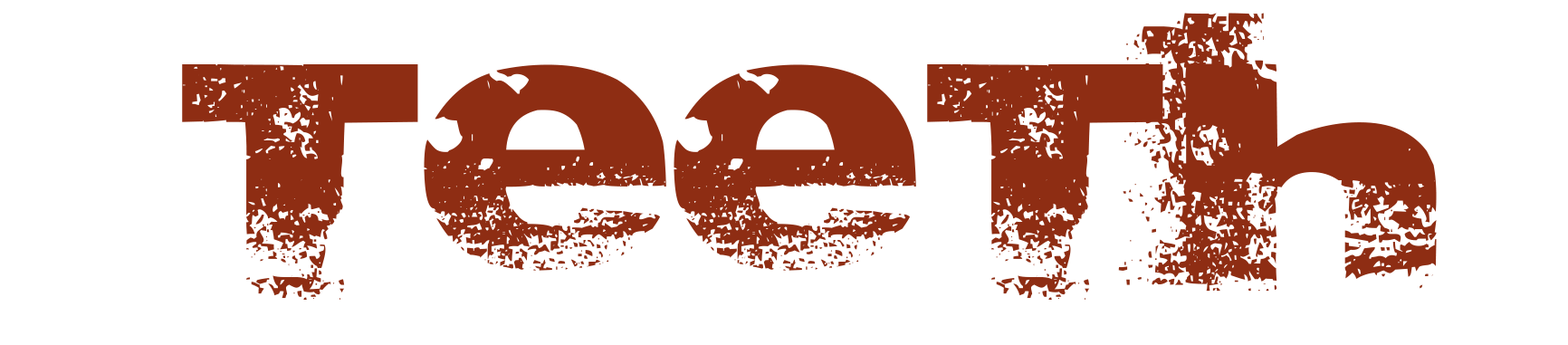
<style>
.page{position:relative;width:1568px;height:345px;background:#ffffff}
.page>*{position:absolute;margin:0}
.t1{font:271.6px "Abite";letter-spacing:0.025em;color:#8e2d13}
</style>
<div class="page">
<p class="t1" style="left:182px;top:13px;width:1255px;height:287px">TEETH</p>
</div>
